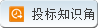
<style>
.page{position:relative;width:98px;height:28px}
.page>*{position:absolute;margin:0}
.t1{font:12px "SimSun";color:#3c3c3c}
</style>
<div class="page">
<p class="t1" style="left:32px;top:8px;width:62px;height:12px">投标知识角</p>
</div>
